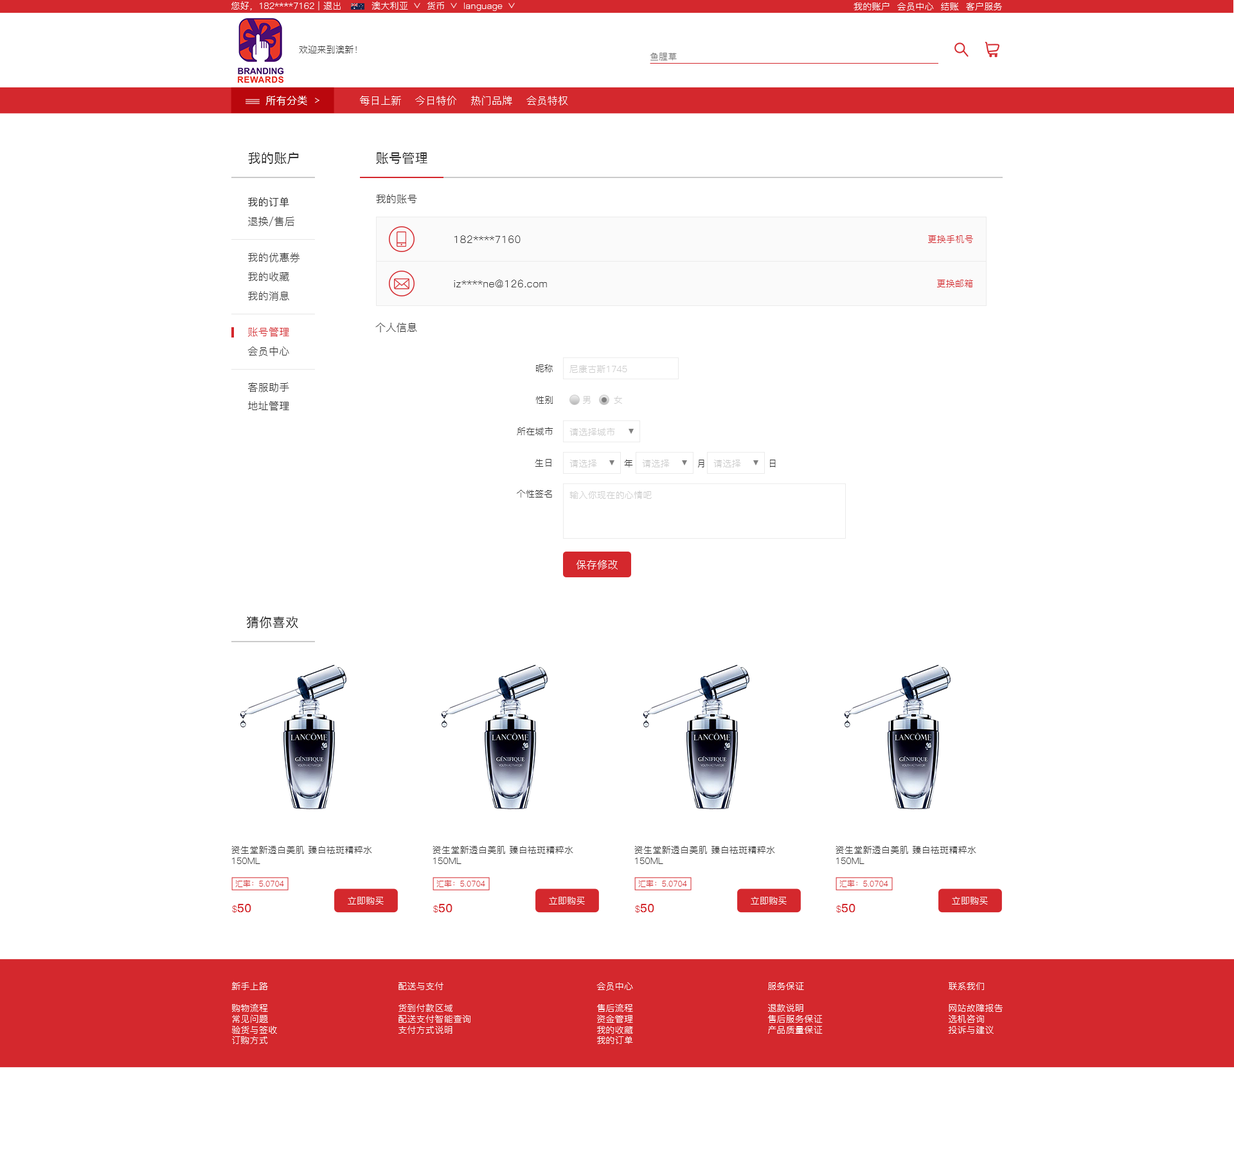
<style>
.page{position:relative;width:1234px;height:1152px;background:#ffffff}
.page>*{position:absolute;margin:0}
.t1{font:9px "PingFang-SC-Regular";letter-spacing:0.02em;color:#ffffff}
.t2{font:9px "PingFang-SC-Regular";letter-spacing:0.02em;color:#333333}
.t3{font:9px "PingFang-SC-Regular";letter-spacing:0.02em;color:#767676}
.t4{font:10.3px "PingFang-SC-Medium";letter-spacing:0.02em;color:#ffffff}
.t5{font:10.3px "PingFang-SC-Regular";letter-spacing:0.02em;color:#ffffff}
.t6{font:12.9px "PingFang-SC-Medium";letter-spacing:0.02em;color:#333333}
.t7{font:10.3px "PingFang-SC-Medium";letter-spacing:0.02em;color:#333333}
.t8{font:10.3px "PingFang-SC-Regular";letter-spacing:0.02em;color:#343434}
.t9{font:9px "PingFang-SC-Regular";letter-spacing:0.02em;color:#d4282d}
.t10{font:10.3px "PingFang-SC-Regular";letter-spacing:0.02em;color:#d4282d}
.t11{font:9px "PingFang-SC-Regular";letter-spacing:0.02em;color:#343434}
.t12{font:9px "PingFang-SC-Regular";letter-spacing:0.02em;color:#cccccc}
.t13{font:7.7px "PingFang-SC-Regular";letter-spacing:0.02em;color:#d4282d}
.t14{font:11.6px "PingFang-SC-Bold";letter-spacing:0.02em;color:#d4282d}
.t15{font:9px "PingFang-SC-Regular";letter-spacing:0.02em;color:#fffefe}
</style>
<div class="page">
<p class="t1" style="left:231px;top:1px;width:110px;height:9px">您好，182****7162 | 退出</p>
<p class="t1" style="left:372px;top:1px;width:36px;height:9px">澳大利亚</p>
<p class="t1" style="left:427px;top:2px;width:17px;height:8px">货币</p>
<p class="t1" style="left:464px;top:3px;width:39px;height:8px">language</p>
<p class="t1" style="left:854px;top:2px;width:148px;height:9px">我的账户  会员中心  结账  客户服务</p>
<p class="t2" style="left:299px;top:45px;width:58px;height:8px">欢迎来到澳新！</p>
<p class="t3" style="left:650px;top:53px;width:27px;height:7px">鱼腥草</p>
<p class="t4" style="left:266px;top:96px;width:41px;height:9px">所有分类</p>
<p class="t5" style="left:360px;top:96px;width:208px;height:9px">每日上新    今日特价    热门品牌    会员特权</p>
<p class="t6" style="left:248px;top:152px;width:51px;height:12px">我的账户</p>
<p class="t6" style="left:376px;top:152px;width:52px;height:12px">账号管理</p>
<p class="t7" style="left:248px;top:197px;width:41px;height:10px">我的订单</p>
<p class="t8" style="left:376px;top:194px;width:41px;height:10px">我的账号</p>
<p class="t8" style="left:248px;top:217px;width:46px;height:9px">退换/售后</p>
<p class="t8" style="left:455px;top:235px;width:66px;height:8px">182****7160</p>
<p class="t9" style="left:928px;top:235px;width:45px;height:8px">更换手机号</p>
<p class="t8" style="left:248px;top:253px;width:52px;height:9px">我的优惠券</p>
<p class="t8" style="left:248px;top:272px;width:41px;height:10px">我的收藏</p>
<p class="t8" style="left:454px;top:280px;width:93px;height:7px">iz****ne@126.com</p>
<p class="t9" style="left:937px;top:279px;width:36px;height:8px">更换邮箱</p>
<p class="t8" style="left:248px;top:291px;width:41px;height:10px">我的消息</p>
<p class="t10" style="left:248px;top:327px;width:41px;height:10px">账号管理</p>
<p class="t8" style="left:375px;top:323px;width:42px;height:9px">个人信息</p>
<p class="t8" style="left:248px;top:346px;width:41px;height:10px">会员中心</p>
<p class="t11" style="left:536px;top:364px;width:17px;height:8px">昵称</p>
<p class="t12" style="left:570px;top:364px;width:57px;height:9px">尼康古斯1745</p>
<p class="t8" style="left:248px;top:382px;width:41px;height:10px">客服助手</p>
<p class="t8" style="left:248px;top:401px;width:41px;height:10px">地址管理</p>
<p class="t11" style="left:536px;top:396px;width:17px;height:8px">性别</p>
<p class="t12" style="left:583px;top:396px;width:8px;height:8px">男</p>
<p class="t12" style="left:614px;top:396px;width:8px;height:8px">女</p>
<p class="t11" style="left:517px;top:427px;width:37px;height:8px">所在城市</p>
<p class="t12" style="left:570px;top:428px;width:45px;height:8px">请选择城市</p>
<p class="t11" style="left:535px;top:459px;width:17px;height:8px">生日</p>
<p class="t12" style="left:570px;top:460px;width:27px;height:7px">请选择</p>
<p class="t2" style="left:624px;top:459px;width:9px;height:8px">年</p>
<p class="t12" style="left:642px;top:460px;width:28px;height:7px">请选择</p>
<p class="t2" style="left:698px;top:460px;width:7px;height:7px">月</p>
<p class="t12" style="left:714px;top:460px;width:27px;height:7px">请选择</p>
<p class="t2" style="left:770px;top:460px;width:6px;height:7px">日</p>
<p class="t11" style="left:517px;top:490px;width:35px;height:8px">个性签名</p>
<p class="t12" style="left:570px;top:491px;width:82px;height:8px">输入你现在的心情吧</p>
<p class="t5" style="left:576px;top:560px;width:42px;height:10px">保存修改</p>
<p class="t6" style="left:247px;top:616px;width:51px;height:12px">猜你喜欢</p>
<p class="t2" style="left:231px;top:845px;width:141px;height:19px">资生堂新透白美肌 臻白祛斑精粹水<br>150ML</p>
<p class="t2" style="left:433px;top:845px;width:140px;height:19px">资生堂新透白美肌 臻白祛斑精粹水<br>150ML</p>
<p class="t2" style="left:634px;top:845px;width:141px;height:19px">资生堂新透白美肌 臻白祛斑精粹水<br>150ML</p>
<p class="t2" style="left:836px;top:845px;width:141px;height:19px">资生堂新透白美肌 臻白祛斑精粹水<br>150ML</p>
<p class="t13" style="left:235px;top:880px;width:49px;height:7px">汇率：5.0704</p>
<p class="t13" style="left:437px;top:880px;width:48px;height:7px">汇率：5.0704</p>
<p class="t13" style="left:638px;top:880px;width:49px;height:7px">汇率：5.0704</p>
<p class="t13" style="left:840px;top:880px;width:48px;height:7px">汇率：5.0704</p>
<p class="t14" style="left:232px;top:904px;width:19px;height:9px"><span class="t9">$</span>50</p>
<p class="t1" style="left:348px;top:897px;width:36px;height:8px">立即购买</p>
<p class="t14" style="left:433px;top:904px;width:20px;height:9px"><span class="t9">$</span>50</p>
<p class="t1" style="left:549px;top:897px;width:36px;height:8px">立即购买</p>
<p class="t14" style="left:635px;top:904px;width:19px;height:9px"><span class="t9">$</span>50</p>
<p class="t1" style="left:751px;top:897px;width:36px;height:8px">立即购买</p>
<p class="t14" style="left:836px;top:904px;width:20px;height:9px"><span class="t9">$</span>50</p>
<p class="t1" style="left:952px;top:897px;width:36px;height:8px">立即购买</p>
<p class="t15" style="left:231px;top:982px;width:46px;height:62px">新手上路<br><br>购物流程<br>常见问题<br>验货与签收<br>订购方式</p>
<p class="t15" style="left:399px;top:982px;width:72px;height:52px">配送与支付<br><br>货到付款区域<br>配送支付智能查询<br>支付方式说明</p>
<p class="t15" style="left:597px;top:982px;width:36px;height:62px">会员中心<br><br>售后流程<br>资金管理<br>我的收藏<br>我的订单</p>
<p class="t15" style="left:768px;top:982px;width:55px;height:52px">服务保证<br><br>退款说明<br>售后服务保证<br>产品质量保证</p>
<p class="t15" style="left:948px;top:982px;width:55px;height:52px">联系我们<br><br>网站故障报告<br>选机咨询<br>投诉与建议</p>
</div>
